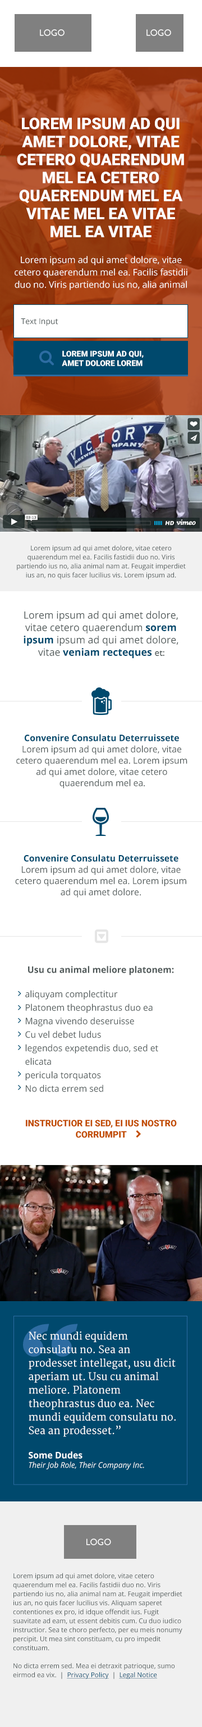
<style>
.page{position:relative;width:202px;height:1727px;background:#ffffff}
.page>*{position:absolute;margin:0}
.t1{font:9px "GillSansMT";color:#ffffff}
.t2{font:15.8px/18px "Roboto-Black";color:#ffffff;text-transform:uppercase}
.t3{font:9px/12.4px "OpenSans";color:#ffffff}
.t4{font:7.9px "OpenSans";color:#4f5858}
.t5{font:7.9px "Roboto-Black";color:#ffffff;text-transform:uppercase}
.t6{font:6.8px/9px "OpenSans";color:#4f5858}
.t7{font:10.1px/12.4px "OpenSans";color:#4f5858}
.t8{font:10.1px/12.4px "OpenSans-Bold";color:#00496d}
.t9{font:10.1px/12.4px "GillSansMT";color:#4f5858}
.t10{font:9px/11.2px "OpenSans";color:#4f5858}
.t11{font:9px/11.2px "OpenSans-Bold";color:#00496d}
.t12{font:9px/11.2px "GillSansMT";color:#4f5858}
.t13{font:9px/13.5px "OpenSans";color:#4f5858}
.t14{font:9px "OpenSans-Bold";color:#4f5858}
.t15{font:9px/11.2px "Roboto-Black";color:#c24d00;text-transform:uppercase}
.t16{font:112.5px "GillSansMT-BoldItalic";color:#2d6ca2}
.t17{font:10.1px/13.5px "Merriweather";color:#ffffff}
.t18{font:9px "OpenSans-Bold";color:#ffffff}
.t19{font:7.9px "OpenSans-Italic";color:#ffffff}
.t20{font:6.7px/9px "OpenSans";color:#4f5858}
.t21{font:6.7px/9px "OpenSans";color:#00496d;text-decoration:underline}
</style>
<div class="page">
<p class="t1" style="left:40px;top:29px;width:25px;height:7px">LOGO</p>
<p class="t1" style="left:147px;top:29px;width:25px;height:7px">LOGO</p>
<p class="t2" style="left:17px;top:118px;width:167px;height:119px;text-align:center">Lorem ipsum ad qui amet dolore, vitae cetero quaerendum mel ea cetero quaerendum mel ea vitae mel ea vitae mel ea vitae</p>
<p class="t3" style="left:15px;top:256px;width:173px;height:34px;text-align:center">Lorem ipsum ad qui amet dolore, vitae cetero quaerendum mel ea. Facilis fastidii duo no. Viris partiendo ius no, alia animal nam at.</p>
<p class="t4" style="left:21px;top:318px;width:37px;height:8px">Text Input</p>
<p class="t5" style="left:62px;top:350px;width:82px;height:16px">Lorem ipsum ad qui,<br>amet dolore Lorem</p>
<p class="t6" style="left:17px;top:545px;width:169px;height:34px;text-align:center">Lorem ipsum ad qui amet dolore, vitae cetero quaerendum mel ea. Facilis fastidii duo no. Viris partiendo ius no, alia animal nam at. Feugait imperdiet ius an, no quis facer lucilius vis. Lorem ipsum ad.</p>
<p class="t7" style="left:24px;top:611px;width:155px;height:47px;text-align:center">Lorem ipsum ad qui amet dolore, vitae cetero quaerendum <span class="t8">sorem ipsum </span>ipsum ad qui amet dolore, vitae <span class="t8">veniam recteques </span><span class="t9">et:</span></p>
<p class="t10" style="left:16px;top:734px;width:172px;height:55px;text-align:center"><span class="t11">Convenire Consulatu Deterruissete<br></span>Lorem ipsum ad qui amet dolore, vitae cetero quaerendum mel ea. Lorem ipsum ad qui amet dolore, vitae cetero quaerendum mel ea<span class="t12">.</span></p>
<p class="t10" style="left:15px;top:854px;width:172px;height:44px;text-align:center"><span class="t11">Convenire Consulatu Deterruissete<br></span>Lorem ipsum ad qui amet dolore, vitae cetero quaerendum mel ea. Lorem ipsum ad qui amet dolore.</p>
<p class="t13" style="left:25px;top:966px;width:149px;height:126px;text-align:center"><span class="t14">Usu cu animal meliore platonem:<br><br></span>     aliquyam complectitur<br>     Platonem theophrastus duo ea<br>     Magna vivendo deseruisse<br>     Cu vel debet ludus<br>     legendos expetendis duo, sed et<br>     elicata<br>     pericula torquatos<br>     No dicta errem sed</p>
<p class="t15" style="left:26px;top:1119px;width:151px;height:19px;text-align:center">instructior ei sed, ei ius nostro corrumpit</p>
<p class="t16" style="left:23px;top:1324px;width:55px;height:33px">“</p>
<p class="t17" style="left:29px;top:1331px;width:147px;height:139px">Nec mundi equidem consulatu no. Sea an prodesset intellegat, usu dicit aperiam ut. Usu cu animal meliore. Platonem theophrastus duo ea. Nec mundi equidem consulatu no. Sea an prodesset.”<br><br><span class="t18">Some Dudes<br></span><span class="t19">Their Job Role, Their Company Inc.</span></p>
<p class="t1" style="left:87px;top:1538px;width:24px;height:7px">LOGO</p>
<p class="t20" style="left:13px;top:1573px;width:170px;height:106px">Lorem ipsum ad qui amet dolore, vitae cetero quaerendum mel ea. Facilis fastidii duo no. Viris partiendo ius no, alia animal nam at. Feugait imperdiet ius an, no quis facer lucilius vis. Aliquam saperet contentiones ex pro, id idque offendit ius. Fugit suavitate ad eam, ut essent debitis cum. Cu duo iudico instructior. Sea te choro perfecto, per eu meis nonumy percipit. Ut mea sint constituam, cu pro impedit constituam.<br><br>No dicta errem sed. Mea ei detraxit patrioque, sumo eirmod ea vix.  |  <span class="t21">Privacy Policy</span>  |  <span class="t21">Legal Notice</span></p>
</div>
